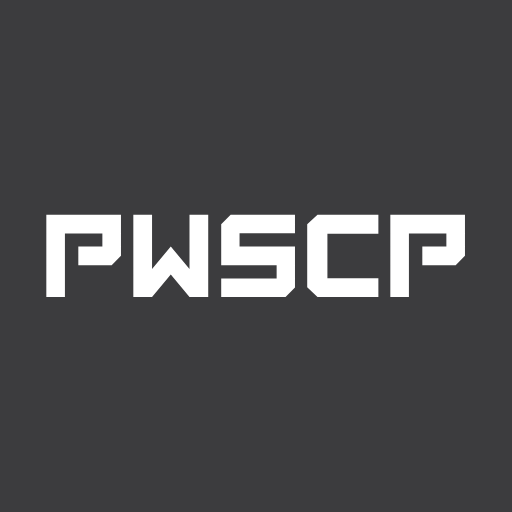
<style>
.page{position:relative;width:512px;height:512px;background:#3c3c3e}
.page>*{position:absolute;margin:0}
.t1{font:124px "Loaded";color:#ffffff}
</style>
<div class="page">
<p class="t1" style="left:46px;top:214px;width:419px;height:83px">pwscp</p>
</div>
